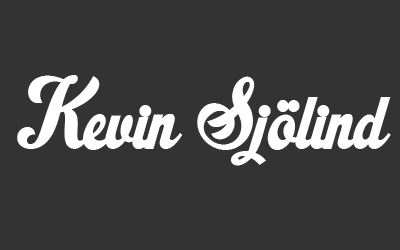
<style>
.page{position:relative;width:400px;height:250px;background:#333333}
.page>*{position:absolute;margin:0}
.t1{font:100px "RistellaPERSONALUSEONLY";color:#ffffff}
</style>
<div class="page">
<p class="t1" style="left:17px;top:75px;width:374px;height:91px">Kevin Sjölind</p>
</div>
